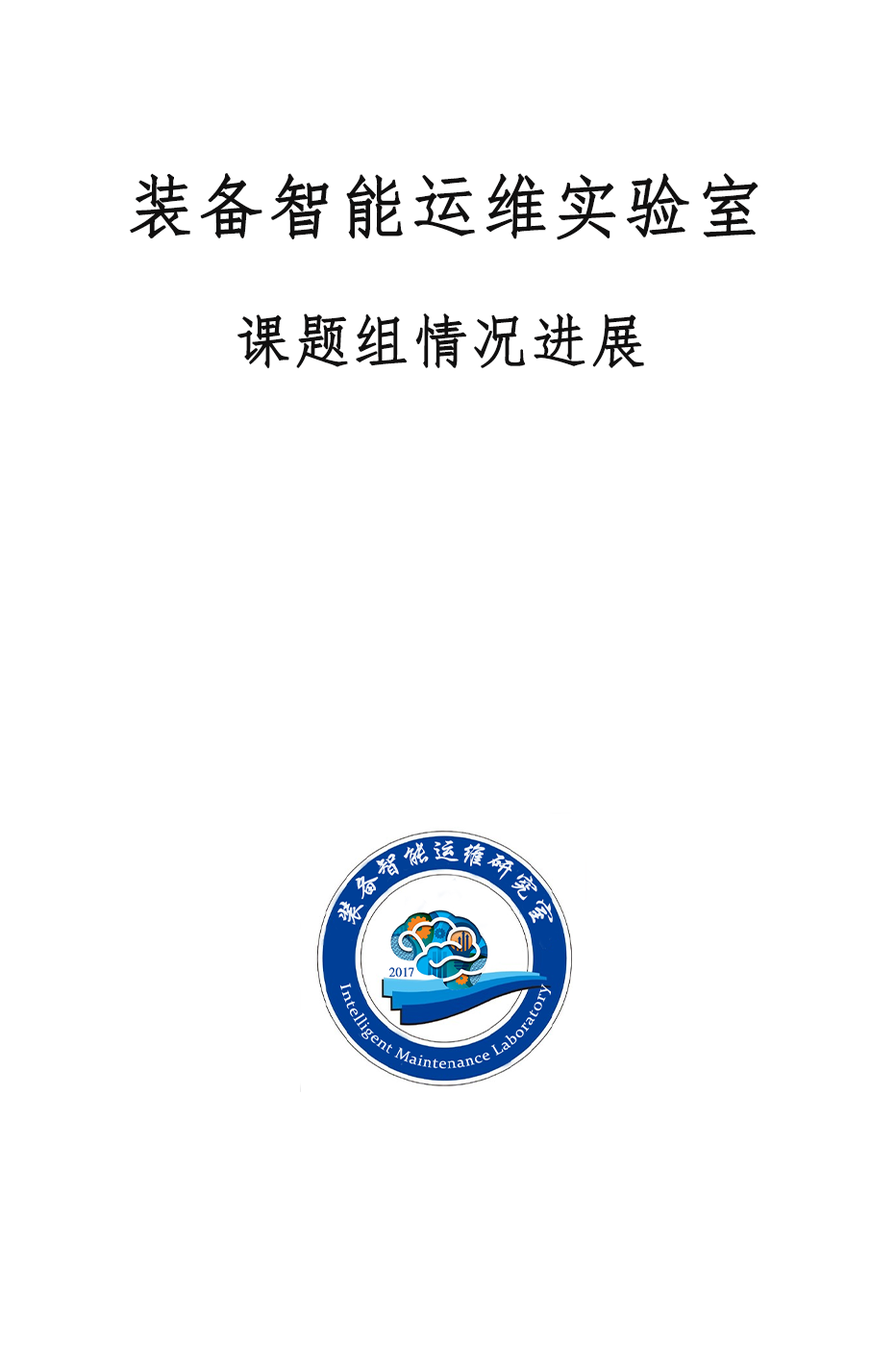
<style>
.page{position:relative;width:871px;height:1369px;background:#ffffff}
.page>*{position:absolute;margin:0}
.t1{font:69.2px "FangSong";color:#111010;font-weight:bold}
.t2{font:57.7px "FangSong";color:#111010;font-weight:bold}
</style>
<div class="page">
<p class="t1" style="left:130px;top:173px;width:629px;height:67px">装备智能运维实验室</p>
<p class="t2" style="left:237px;top:312px;width:407px;height:57px">课题组情况进展</p>
</div>
